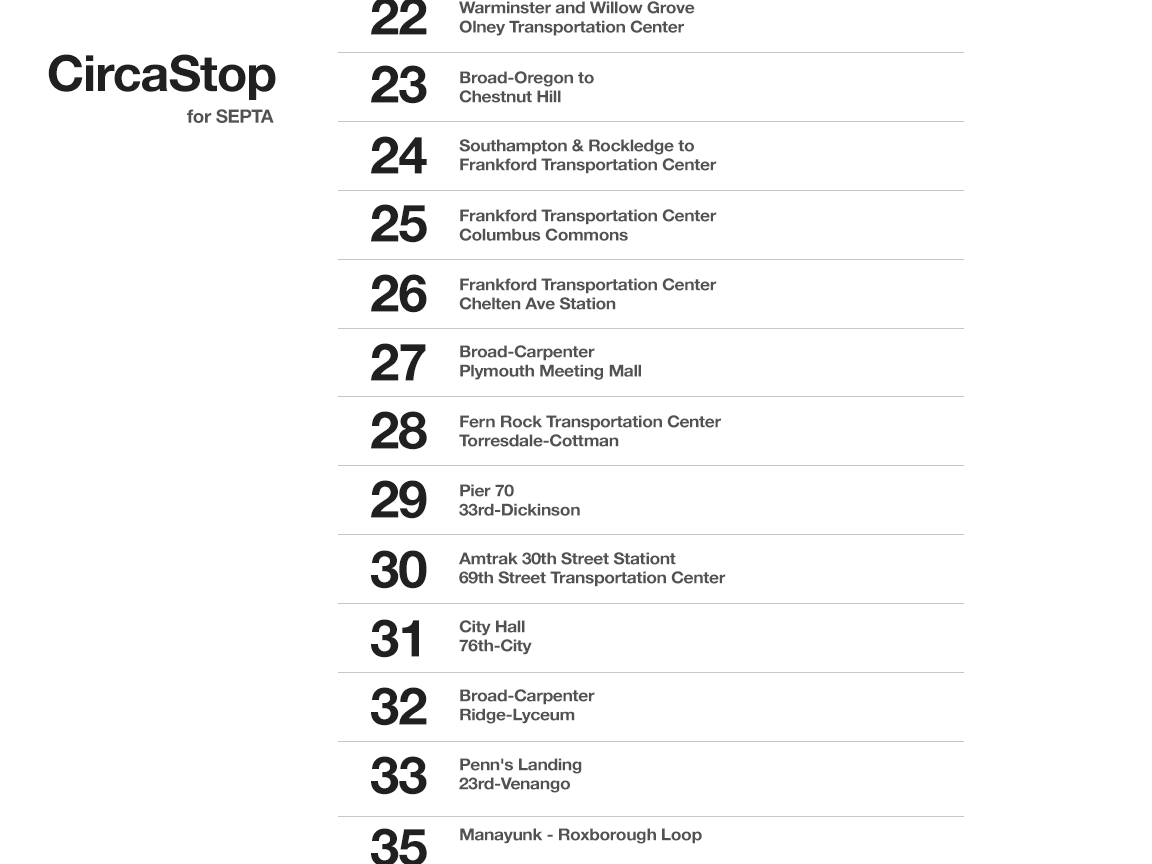
<style>
.page{position:relative;width:1152px;height:864px;background:#ffffff}
.page>*{position:absolute;margin:0}
.t1{font:16.6px/19px "HelveticaNeue-Bold";letter-spacing:-0.02em;color:#525252;scale:1.05 1}
.t2{font:50.1px "HelveticaNeue-Bold";letter-spacing:-0.02em;color:#202020}
.t3{font:51.8px "HelveticaNeue-Bold";letter-spacing:-0.02em;color:#202020}
.t4{font:18.5px "HelveticaNeue-Bold";letter-spacing:-0.02em;color:#525252}
.t5{font:16.6px "HelveticaNeue-Bold";letter-spacing:-0.02em;color:#525252;scale:1.05 1}
</style>
<div class="page">
<p class="t1" style="left:459px;top:1px;width:236px;height:35px">Warminster and Willow Grove <br>Olney Transportation Center</p>
<p class="t2" style="left:48px;top:54px;width:228px;height:46px">CircaStop</p>
<p class="t3" style="left:371px;top:65px;width:56px;height:39px">23</p>
<p class="t1" style="left:459px;top:71px;width:135px;height:32px">Broad-Oregon to <br>Chestnut Hill</p>
<p class="t4" style="left:187px;top:109px;width:87px;height:14px">for SEPTA</p>
<p class="t3" style="left:371px;top:136px;width:56px;height:38px">24</p>
<p class="t1" style="left:459px;top:139px;width:258px;height:35px">Southampton &amp; Rockledge to<br>Frankford Transportation Center</p>
<p class="t3" style="left:371px;top:204px;width:56px;height:39px">25</p>
<p class="t1" style="left:459px;top:209px;width:258px;height:32px">Frankford Transportation Center <br>Columbus Commons</p>
<p class="t3" style="left:371px;top:274px;width:56px;height:39px">26</p>
<p class="t1" style="left:459px;top:278px;width:258px;height:32px">Frankford Transportation Center <br>Chelten Ave Station</p>
<p class="t3" style="left:371px;top:343px;width:55px;height:38px">27</p>
<p class="t1" style="left:460px;top:345px;width:181px;height:35px">Broad-Carpenter <br>Plymouth Meeting Mall</p>
<p class="t3" style="left:371px;top:411px;width:56px;height:39px">28</p>
<p class="t1" style="left:459px;top:415px;width:262px;height:32px">Fern Rock Transportation Center <br>Torresdale-Cottman</p>
<p class="t3" style="left:371px;top:480px;width:56px;height:39px">29</p>
<p class="t1" style="left:459px;top:484px;width:121px;height:32px">Pier 70 <br>33rd-Dickinson</p>
<p class="t3" style="left:371px;top:550px;width:56px;height:39px">30</p>
<p class="t1" style="left:459px;top:552px;width:267px;height:35px">Amtrak 30th Street Stationt<br>69th Street Transportation Center</p>
<p class="t3" style="left:371px;top:619px;width:48px;height:39px">31</p>
<p class="t1" style="left:459px;top:620px;width:73px;height:35px">City Hall <br>76th-City</p>
<p class="t3" style="left:371px;top:687px;width:56px;height:39px">32</p>
<p class="t1" style="left:460px;top:689px;width:135px;height:35px">Broad-Carpenter<br>Ridge-Lyceum</p>
<p class="t3" style="left:371px;top:756px;width:56px;height:39px">33</p>
<p class="t1" style="left:459px;top:758px;width:123px;height:35px">Penn's Landing<br>23rd-Venango</p>
<p class="t5" style="left:460px;top:828px;width:242px;height:16px">Manayunk - Roxborough Loop</p>
</div>
